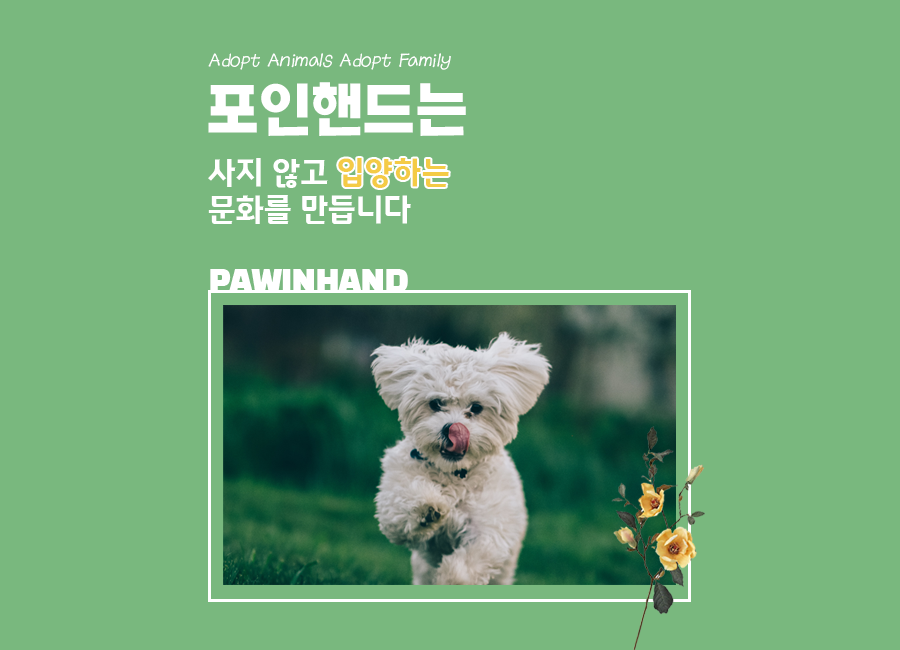
<style>
.page{position:relative;width:900px;height:650px;background:#79b87e}
.page>*{position:absolute;margin:0}
.t1{font:19.3px "ACCchildrenskyOTF";color:#ffffff;font-style:italic}
.t2{font:54px "KOTRA_BOLD-Bold";letter-spacing:-0.02em;color:#ffffff}
.t3{font:30.8px "Gwangyang-Touching";letter-spacing:-0.02em;color:#ffffff}
.t4{font:30.8px "Gwangyang-Touching";color:#f4cb46}
.t5{font:30.8px "BlackHanSans-Regular";letter-spacing:-0.02em;color:#ffffff}
</style>
<div class="page">
<p class="t1" style="left:208px;top:53px;width:243px;height:17px">Adopt Animals Adopt Family</p>
<p class="t2" style="left:208px;top:82px;width:258px;height:54px">포인핸드는</p>
<p class="t3" style="left:208px;top:158px;width:203px;height:66px">사지 않고<br>문화를 만듭니다</p>
<p class="t4" style="left:338px;top:158px;width:111px;height:30px">입양하는</p>
<p class="t5" style="left:210px;top:269px;width:198px;height:23px">PAWINHAND</p>
</div>
